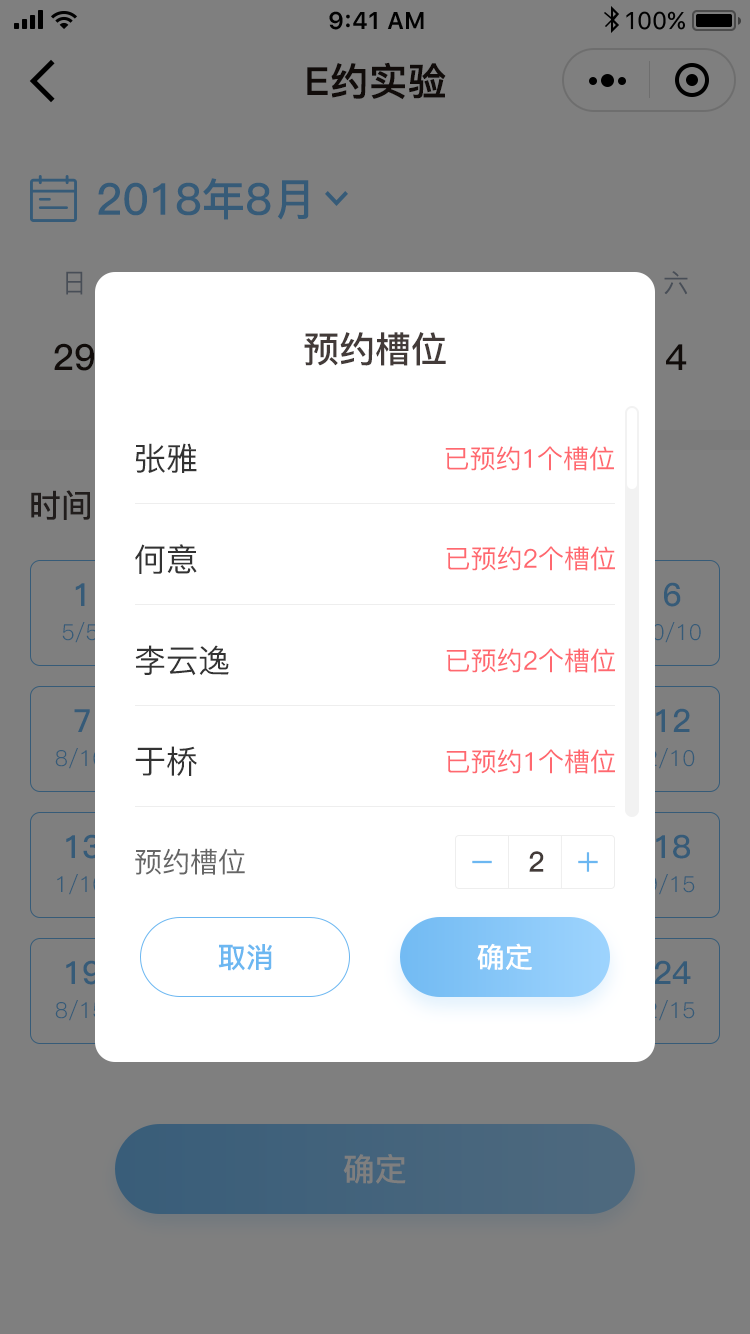
<style>
.page{position:relative;width:750px;height:1334px;background:#7f7f7f}
.page>*{position:absolute;margin:0}
.t1{font:38px "PingFang-SC-Bold";color:#231815;font-weight:bold}
.t2{font:44px "PingFang-SC-Bold";color:#365b78}
.t3{font:26px "PingFang-SC-Medium";color:#484e57}
.t4{font:36px "PingFang-SC-Bold";color:#433b39}
.t5{font:36px "PingFang-SC-Bold";color:#231815}
.t6{font:32px "PingFang-SC-Medium";color:#333333}
.t7{font:26px "PingFang-SC-Medium";color:#ff686f}
.t8{font:28px "PingFang-SC-Regular"}
.t9{font:32px "PingFang-SC-Bold"}
.t10{font:32px "PingFang-SC-Bold";color:#365b78}
.t11{font:22px "PingFang-SC-Regular";color:#365b78}
.t12{font:28px "PingFang-SC-Medium";color:#666666}
.t13{font:28.1px "PingFang-SC-Bold";color:#433b39}
.t14{font:28.4px "PingFang-SC-Bold";color:#6cb7f1}
.t15{font:28.4px "PingFang-SC-Bold";color:#ffffff}
.t16{font:32px "PingFang-SC-Bold";color:#7f7f7f}
</style>
<div class="page">
<p class="t1" style="left:307px;top:62px;width:139px;height:38px">E约实验</p>
<p class="t2" style="left:98px;top:178px;width:211px;height:42px">2018年8月</p>
<p class="t3" style="left:66px;top:271px;width:17px;height:24px">日</p>
<p class="t3" style="left:664px;top:271px;width:24px;height:24px">六</p>
<p class="t4" style="left:304px;top:332px;width:142px;height:34px">预约槽位</p>
<p class="t5" style="left:54px;top:343px;width:40px;height:28px">29</p>
<p class="t5" style="left:666px;top:344px;width:21px;height:26px">4</p>
<p class="t6" style="left:135px;top:443px;width:62px;height:30px">张雅</p>
<p class="t7" style="left:445px;top:446px;width:169px;height:25px">已预约1个槽位</p>
<p class="t8" style="left:31px;top:490px;width:210px;height:30px"><span class="t9">时间</span>（单位：时）</p>
<p class="t6" style="left:135px;top:544px;width:62px;height:30px">何意</p>
<p class="t7" style="left:446px;top:546px;width:169px;height:25px">已预约2个槽位</p>
<p class="t10" style="left:664px;top:582px;width:17px;height:25px">6</p>
<p class="t10" style="left:75px;top:583px;width:10px;height:23px">1</p>
<p class="t11" style="left:62px;top:622px;width:36px;height:21px">5/5</p>
<p class="t6" style="left:135px;top:645px;width:94px;height:31px">李云逸</p>
<p class="t7" style="left:446px;top:648px;width:169px;height:25px">已预约2个槽位</p>
<p class="t10" style="left:74px;top:709px;width:16px;height:23px">7</p>
<p class="t10" style="left:656px;top:708px;width:34px;height:24px">12</p>
<p class="t6" style="left:135px;top:746px;width:62px;height:30px">于桥</p>
<p class="t7" style="left:446px;top:749px;width:169px;height:25px">已预约1个槽位</p>
<p class="t10" style="left:656px;top:834px;width:34px;height:25px">18</p>
<p class="t12" style="left:135px;top:848px;width:110px;height:27px">预约槽位</p>
<p class="t13" style="left:529px;top:851px;width:15px;height:21px">2</p>
<p class="t14" style="left:218px;top:944px;width:54px;height:27px">取消</p>
<p class="t15" style="left:477px;top:943px;width:55px;height:27px">确定</p>
<p class="t10" style="left:654px;top:960px;width:37px;height:24px">24</p>
<p class="t16" style="left:343px;top:1154px;width:63px;height:30px">确定</p>
</div>
